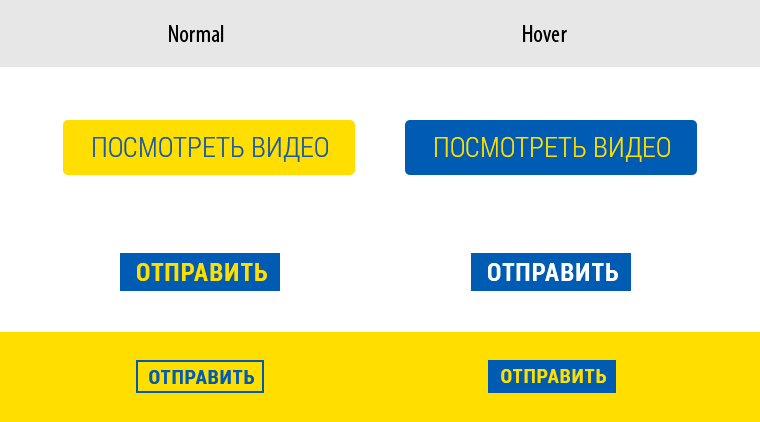
<style>
.page{position:relative;width:760px;height:422px;background:#ffffff}
.page>*{position:absolute;margin:0}
.t1{font:28px "RobotoCondensed-Light";color:#1a5aa7;text-transform:uppercase}
.t2{font:28px "RobotoCondensed-Light";color:#ffde00;text-transform:uppercase}
.t3{font:25px "RobotoCondensed-Bold";letter-spacing:0.05em;color:#ffde00;text-transform:uppercase}
.t4{font:25px "RobotoCondensed-Bold";letter-spacing:0.05em;color:#ffffff;text-transform:uppercase}
.t5{font:20px "RobotoCondensed-Bold";letter-spacing:0.05em;color:#005cb2}
.t6{font:20px "RobotoCondensed-Bold";letter-spacing:0.05em;color:#ffde00}
</style>
<div class="page">
<p class="t1" style="left:93px;top:137px;width:235px;height:25px">Посмотреть видео</p>
<p class="t2" style="left:435px;top:137px;width:235px;height:25px">Посмотреть видео</p>
<p class="t3" style="left:137px;top:263px;width:130px;height:18px">отправить</p>
<p class="t4" style="left:488px;top:263px;width:130px;height:18px">отправить</p>
<p class="t5" style="left:149px;top:370px;width:105px;height:14px">ОТПРАВИТЬ</p>
<p class="t6" style="left:501px;top:369px;width:105px;height:14px">ОТПРАВИТЬ</p>
</div>
